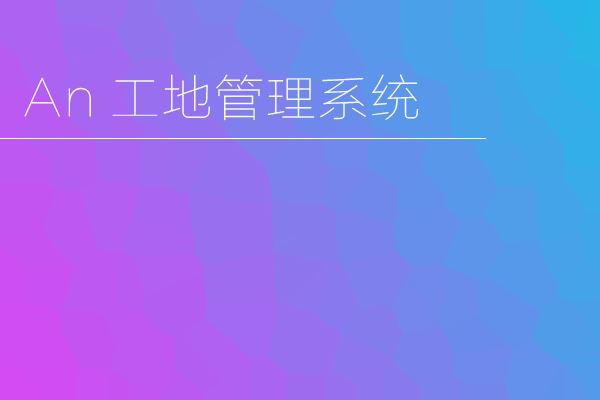
<style>
.page{position:relative;width:600px;height:400px}
.page>*{position:absolute;margin:0}
.t1{font:50px "FZLTCXHJW--GB1-0";letter-spacing:0.04em;color:#ffffff}
</style>
<div class="page">
<p class="t1" style="left:24px;top:74px;width:395px;height:47px">An工地管理系统</p>
</div>
